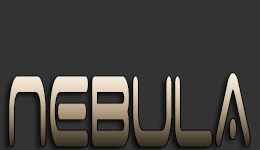
<style>
.page{position:relative;width:260px;height:150px;background:#333333}
.page>*{position:absolute;margin:0}
.t1{font:160.1px "SpaceAge";scale:0.29 1}
</style>
<div class="page">
<p class="t1" style="left:9px;top:73px;width:241px;height:74px">NEBULA</p>
</div>
